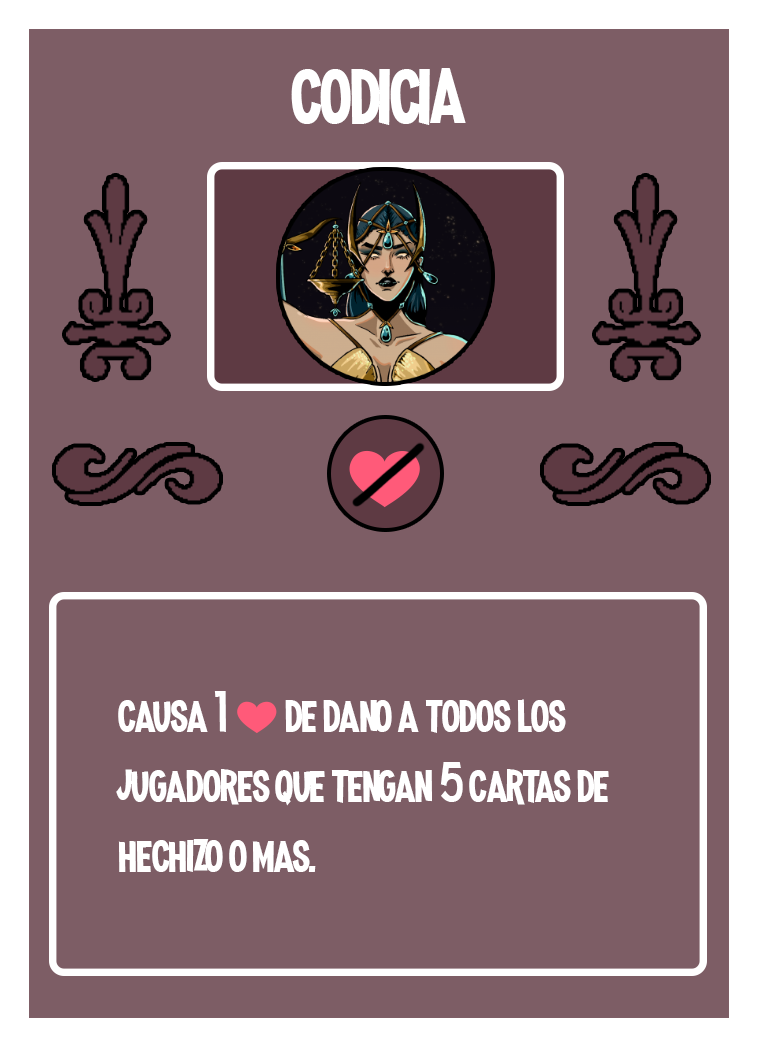
<style>
.page{position:relative;width:758px;height:1047px;background:#7d5d65}
.page>*{position:absolute;margin:0}
.t1{font:100px "MadnessHyperactive";color:#ffffff}
.t2{font:58.3px "MadnessHyperactive";color:#ffffff}
.t3{font:41.7px "EmojiOneColor";color:#ffffff}
</style>
<div class="page">
<p class="t1" style="left:291px;top:68px;width:175px;height:57px">codicia</p>
<p class="t2" style="left:116px;top:691px;width:493px;height:181px">causa 1 <span class="t3">❤️ </span>de dano a todos los jugadores que tengan 5 cartas de <br>hechizo o mas.</p>
</div>
